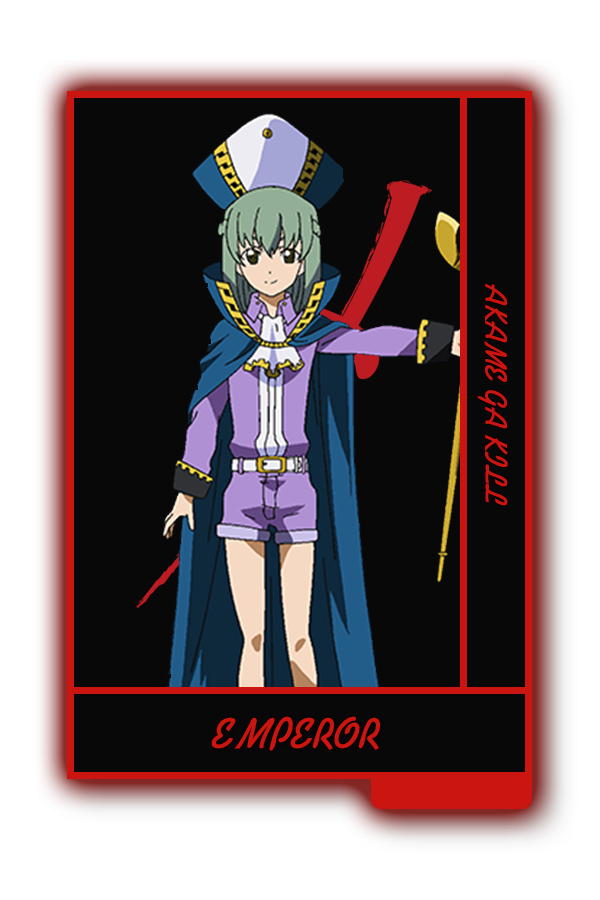
<style>
.page{position:relative;width:600px;height:900px;background:#080808}
.page>*{position:absolute;margin:0}
.t1{font:31.2px "Alako-Bold";color:#cb1511}
.t2{font:43.2px "Alako-Bold";color:#cb1511}
</style>
<div class="page">
<p class="t1" style="left:477px;top:283px;width:31px;height:223px;rotate:90deg">AKAME GA KILL</p>
<p class="t2" style="left:211px;top:716px;width:169px;height:35px">EMPEROR</p>
</div>
